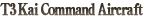
<style>
.page{position:relative;width:145px;height:18px;background:#ffffff}
.page>*{position:absolute;margin:0}
.t1{font:16px "RyuminPro-ExBold";letter-spacing:-0.11em;color:#4a3f32;font-weight:bold;scale:0.8 1}
</style>
<div class="page">
<p class="t1" style="left:0px;top:2px;width:143px;height:14px">T3 Kai Command Aircraft</p>
</div>
